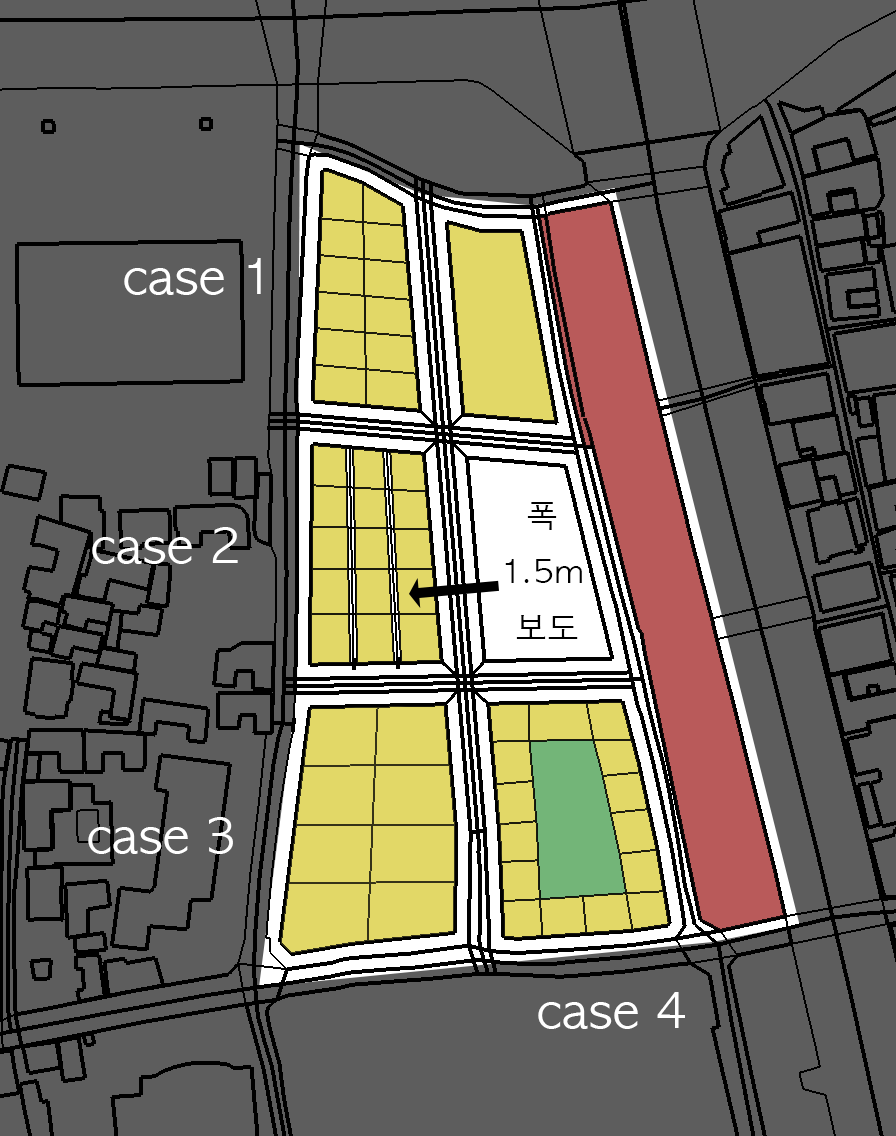
<style>
.page{position:relative;width:896px;height:1136px;background:#5d5d5d}
.page>*{position:absolute;margin:0}
.t1{font:48px "AppleGothic";color:#ffffff}
.t2{font:32px "AppleGothic";color:#000000}
</style>
<div class="page">
<p class="t1" style="left:124px;top:258px;width:137px;height:37px">case 1</p>
<p class="t2" style="left:505px;top:502px;width:77px;height:137px;text-align:center">폭 <br>1.5m <br>보도</p>
<p class="t1" style="left:92px;top:527px;width:146px;height:37px">case 2</p>
<p class="t1" style="left:88px;top:817px;width:145px;height:37px">case 3</p>
<p class="t1" style="left:538px;top:992px;width:147px;height:37px">case 4</p>
</div>
